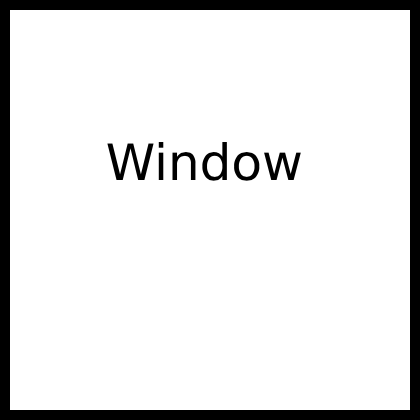
<style>
.page{position:relative;width:420px;height:420px;background:#ffffff}
.page>*{position:absolute;margin:0}
.t1{font:50px "DejaVuSans";color:#000000}
</style>
<div class="page">
<p class="t1" style="left:107px;top:142px;width:194px;height:39px">Window</p>
</div>
